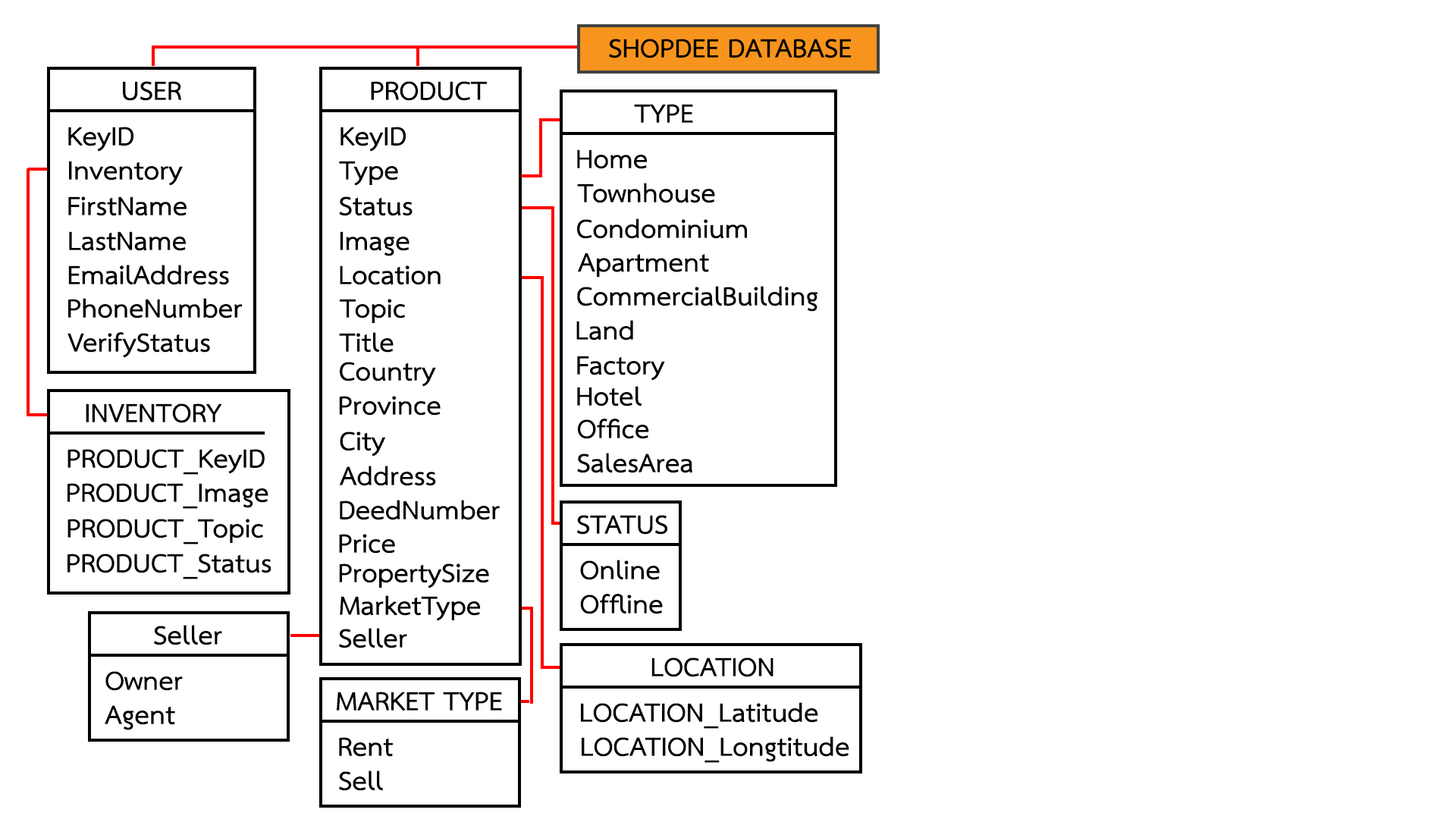
<style>
.page{position:relative;width:1456px;height:819px;background:#ffffff}
.page>*{position:absolute;margin:0}
.t1{font:37.9px "THSarabunPSK-Bold";color:#000000}
</style>
<div class="page">
<p class="t1" style="left:609px;top:39px;width:242px;height:19px">SHOPDEE DATABASE</p>
<p class="t1" style="left:123px;top:81px;width:58px;height:20px">USER</p>
<p class="t1" style="left:371px;top:81px;width:116px;height:20px">PRODUCT</p>
<p class="t1" style="left:634px;top:104px;width:59px;height:19px">TYPE</p>
<p class="t1" style="left:68px;top:127px;width:65px;height:25px">KeyID</p>
<p class="t1" style="left:340px;top:127px;width:66px;height:25px">KeyID</p>
<p class="t1" style="left:577px;top:149px;width:71px;height:20px">Home</p>
<p class="t1" style="left:69px;top:161px;width:114px;height:25px">Inventory</p>
<p class="t1" style="left:339px;top:161px;width:59px;height:25px">Type</p>
<p class="t1" style="left:577px;top:183px;width:138px;height:20px">Townhouse</p>
<p class="t1" style="left:68px;top:196px;width:119px;height:20px">FirstName</p>
<p class="t1" style="left:339px;top:196px;width:74px;height:20px">Status</p>
<p class="t1" style="left:577px;top:218px;width:170px;height:21px">Condominium</p>
<p class="t1" style="left:69px;top:231px;width:117px;height:20px">LastName</p>
<p class="t1" style="left:340px;top:231px;width:69px;height:25px">Image</p>
<p class="t1" style="left:578px;top:253px;width:131px;height:25px">Apartment</p>
<p class="t1" style="left:68px;top:265px;width:161px;height:20px">EmailAddress</p>
<p class="t1" style="left:340px;top:265px;width:101px;height:20px">Location</p>
<p class="t1" style="left:577px;top:286px;width:240px;height:26px">CommercialBuilding</p>
<p class="t1" style="left:68px;top:298px;width:174px;height:20px">PhoneNumber</p>
<p class="t1" style="left:340px;top:299px;width:65px;height:24px">Topic</p>
<p class="t1" style="left:576px;top:320px;width:57px;height:20px">Land</p>
<p class="t1" style="left:67px;top:332px;width:143px;height:26px">VerifyStatus</p>
<p class="t1" style="left:339px;top:332px;width:55px;height:21px">Title</p>
<p class="t1" style="left:340px;top:362px;width:96px;height:25px">Country</p>
<p class="t1" style="left:577px;top:356px;width:88px;height:25px">Factory</p>
<p class="t1" style="left:577px;top:386px;width:65px;height:20px">Hotel</p>
<p class="t1" style="left:339px;top:396px;width:102px;height:20px">Province</p>
<p class="t1" style="left:86px;top:403px;width:136px;height:20px">INVENTORY</p>
<p class="t1" style="left:578px;top:419px;width:71px;height:20px">Office</p>
<p class="t1" style="left:340px;top:431px;width:46px;height:26px">City</p>
<p class="t1" style="left:67px;top:449px;width:198px;height:26px">PRODUCT_KeyID</p>
<p class="t1" style="left:577px;top:453px;width:115px;height:20px">SalesArea</p>
<p class="t1" style="left:339px;top:466px;width:97px;height:20px">Address</p>
<p class="t1" style="left:67px;top:483px;width:201px;height:26px">PRODUCT_Image</p>
<p class="t1" style="left:340px;top:500px;width:160px;height:20px">DeedNumber</p>
<p class="t1" style="left:67px;top:519px;width:196px;height:25px">PRODUCT_Topic</p>
<p class="t1" style="left:576px;top:515px;width:91px;height:20px">STATUS</p>
<p class="t1" style="left:339px;top:534px;width:56px;height:20px">Price</p>
<p class="t1" style="left:67px;top:554px;width:204px;height:25px">PRODUCT_Status</p>
<p class="t1" style="left:339px;top:563px;width:150px;height:25px">PropertySize</p>
<p class="t1" style="left:580px;top:560px;width:80px;height:20px">Online</p>
<p class="t1" style="left:580px;top:594px;width:83px;height:20px">Offline</p>
<p class="t1" style="left:340px;top:595px;width:141px;height:26px">MarketType</p>
<p class="t1" style="left:154px;top:625px;width:68px;height:20px">Seller</p>
<p class="t1" style="left:339px;top:628px;width:68px;height:20px">Seller</p>
<p class="t1" style="left:651px;top:657px;width:122px;height:20px">LOCATION</p>
<p class="t1" style="left:105px;top:671px;width:78px;height:20px">Owner</p>
<p class="t1" style="left:337px;top:692px;width:165px;height:19px">MARKET TYPE</p>
<p class="t1" style="left:105px;top:705px;width:70px;height:25px">Agent</p>
<p class="t1" style="left:581px;top:702px;width:237px;height:27px">LOCATION_Latitude</p>
<p class="t1" style="left:339px;top:737px;width:54px;height:20px">Rent</p>
<p class="t1" style="left:582px;top:736px;width:267px;height:27px">LOCATION_Longtitude</p>
<p class="t1" style="left:339px;top:770px;width:44px;height:21px">Sell</p>
</div>
